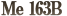
<style>
.page{position:relative;width:67px;height:16px;background:#ffffff}
.page>*{position:absolute;margin:0}
.t1{font:18px "RyuminPro-ExBold";letter-spacing:-0.06em;color:#4a3f32;font-weight:bold;scale:0.9 1}
</style>
<div class="page">
<p class="t1" style="left:1px;top:1px;width:61px;height:15px">Me 163B</p>
</div>
